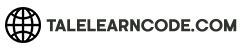
<style>
.page{position:relative;width:248px;height:52px;background:#ffffff}
.page>*{position:absolute;margin:0}
.t1{font:15.8px "Kamerik205-Regular3";color:#2f322e;text-transform:uppercase;font-weight:bold}
</style>
<div class="page">
<p class="t1" style="left:46px;top:19px;width:191px;height:13px">talelearncode.com</p>
</div>
